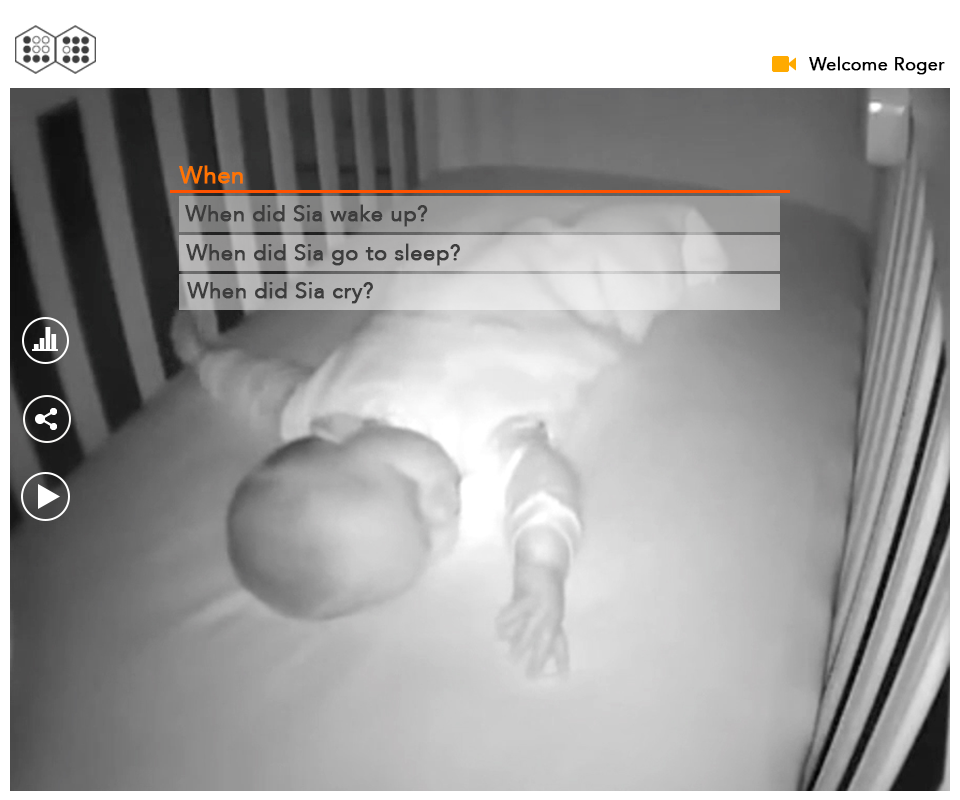
<style>
.page{position:relative;width:960px;height:800px}
.page>*{position:absolute;margin:0}
.t1{font:18px "Avenir-Roman";color:#000000;font-weight:bold}
.t2{font:24px "Avenir-Roman";color:#ff7400;font-weight:bold}
.t3{font:22px "Avenir-Roman";color:#3d3d3d;font-weight:bold}
</style>
<div class="page">
<p class="t1" style="left:809px;top:56px;width:136px;height:19px">Welcome Roger</p>
<p class="t2" style="left:179px;top:165px;width:64px;height:19px">When</p>
<p class="t3" style="left:185px;top:204px;width:243px;height:23px">When did Sia wake up?</p>
<p class="t3" style="left:186px;top:243px;width:274px;height:23px">When did Sia go to sleep?</p>
<p class="t3" style="left:187px;top:282px;width:186px;height:22px">When did Sia cry?</p>
</div>
